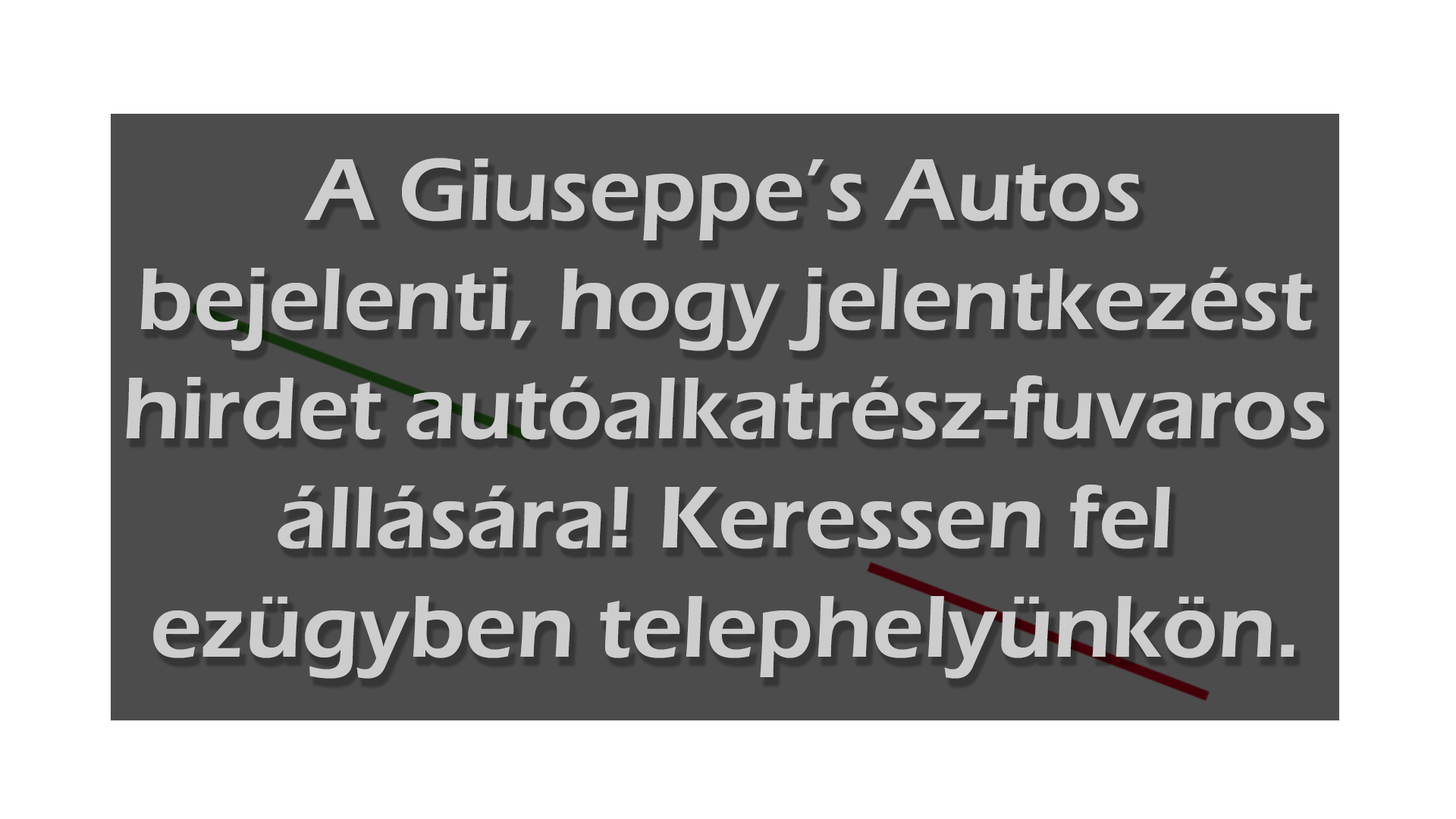
<style>
.page{position:relative;width:1456px;height:819px;background:#4c4c4c}
.page>*{position:absolute;margin:0}
.t1{font:91px "ErasITC-Demi";color:#cdcdcd}
</style>
<div class="page">
<p class="t1" style="left:126px;top:158px;width:1199px;height:521px;text-align:center">A Giuseppe’s Autos bejelenti, hogy jelentkezést hirdet autóalkatrész-fuvaros állására! Keressen fel ezügyben telephelyünkön. ha érdekli!</p>
</div>
